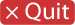
<style>
.page{position:relative;width:75px;height:25px;background:#cc3333}
.page>*{position:absolute;margin:0}
.t1{font:24px "MyriadWebPro";color:#ffffff}
</style>
<div class="page">
<p class="t1" style="left:6px;top:2px;width:63px;height:20px">× Quit</p>
</div>
